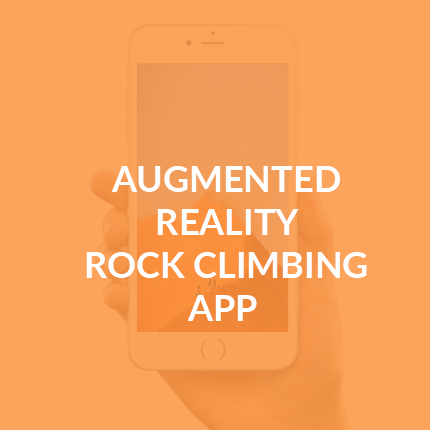
<style>
.page{position:relative;width:430px;height:430px;background:#fca45c}
.page>*{position:absolute;margin:0}
.t1{font:36px "Lato-Bold";color:#fffefe}
</style>
<div class="page">
<p class="t1" style="left:86px;top:166px;width:281px;height:155px;text-align:center">AUGMENTED<br>REALITY<br>ROCK CLIMBING<br>APP</p>
</div>
